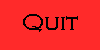
<style>
.page{position:relative;width:100px;height:50px;background:#ff2a2a}
.page>*{position:absolute;margin:0}
.t1{font:24px "CopperplateGothic-Light";color:#000000}
</style>
<div class="page">
<p class="t1" style="left:23px;top:14px;width:55px;height:18px">Quit</p>
</div>
